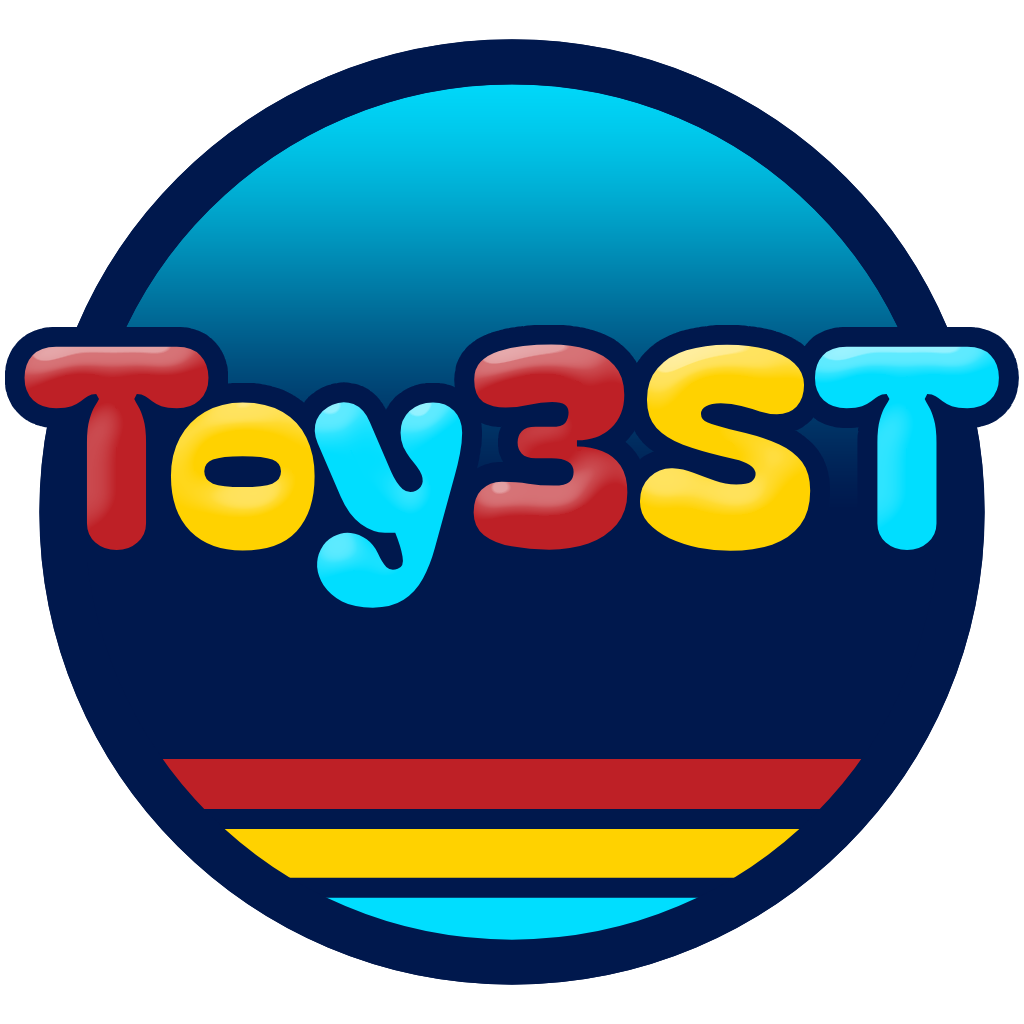
<style>
.page{position:relative;width:1024px;height:1024px;background:#00184d}
.page>*{position:absolute;margin:0}
.t1{font:280px "BagelFatOne-Regular";color:#be2026}
.t2{font:280px "BagelFatOne-Regular";color:#ffd200}
.t3{font:280px "BagelFatOne-Regular";color:#00deff}
</style>
<div class="page">
<p class="t1" style="left:24px;top:344px;width:975px;height:264px">T<span class="t2">o</span><span class="t3">y</span>3<span class="t2">S</span><span class="t3">T</span></p>
</div>
